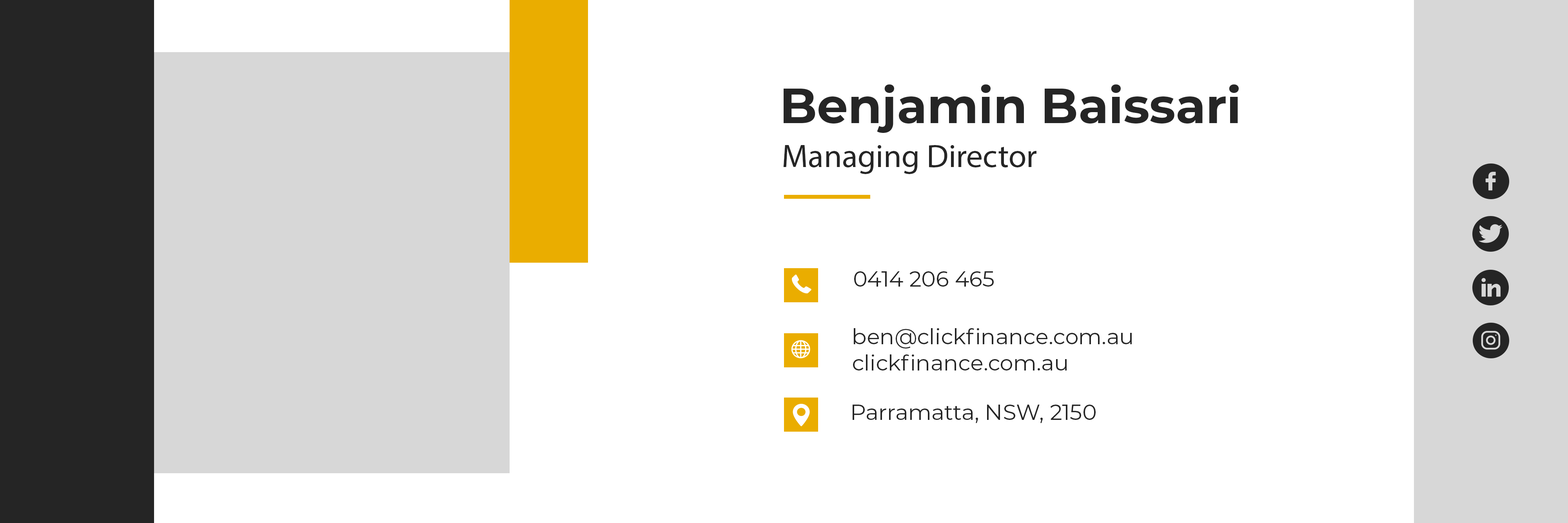
<style>
.page{position:relative;width:1568px;height:523px;background:#ffffff}
.page>*{position:absolute;margin:0}
.t1{font:49px "Montserrat-Bold";color:#252525}
.t2{font:32.7px "MyriadPro-Regular";color:#252525}
.t3{font:21.8px "Montserrat-Regular";color:#252525}
</style>
<div class="page">
<p class="t1" style="left:784px;top:84px;width:455px;height:49px">Benjamin Baissari</p>
<p class="t2" style="left:783px;top:145px;width:253px;height:29px">Managing Director</p>
<p class="t3" style="left:854px;top:271px;width:140px;height:16px">0414 206 465</p>
<p class="t3" style="left:853px;top:328px;width:279px;height:42px">ben@clickfinance.com.au<br>clickfinance.com.au</p>
<p class="t3" style="left:853px;top:405px;width:243px;height:18px">Parramatta, NSW, 2150</p>
</div>
